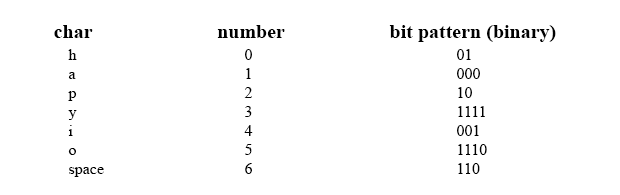
<style>
.page{position:relative;width:620px;height:195px;background:#ffffff}
.page>*{position:absolute;margin:0}
.t1{font:20px "TimesNewRomanPS-BoldMT";color:#000000}
.t2{font:16px/19px "TimesNewRomanPSMT";color:#000000}
</style>
<div class="page">
<p class="t1" style="left:54px;top:25px;width:502px;height:17px">char                         number                     bit pattern (binary)</p>
<p class="t2" style="left:68px;top:49px;width:36px;height:128px">h<br>a<br>p<br>y<br>i<br>o<br>space</p>
<p class="t2" style="left:244px;top:49px;width:9px;height:125px">0<br>1<br>2<br>3<br>4<br>5<br>6</p>
<p class="t2" style="left:457px;top:49px;width:30px;height:125px">01<br>000<br>10<br>1111<br>001<br>1110<br>110</p>
</div>
